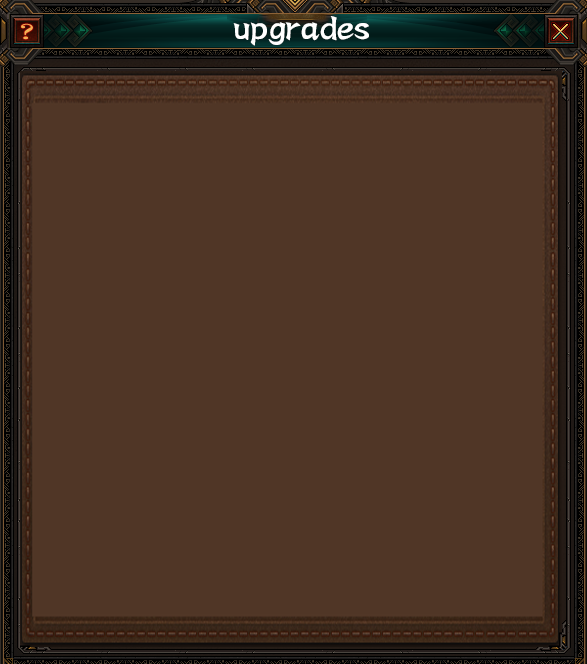
<style>
.page{position:relative;width:587px;height:664px;background:#503626}
.page>*{position:absolute;margin:0}
.t1{font:33.2px "HYh3gj";color:#ffffff}
</style>
<div class="page">
<p class="t1" style="left:233px;top:16px;width:136px;height:30px">upgrades</p>
</div>
